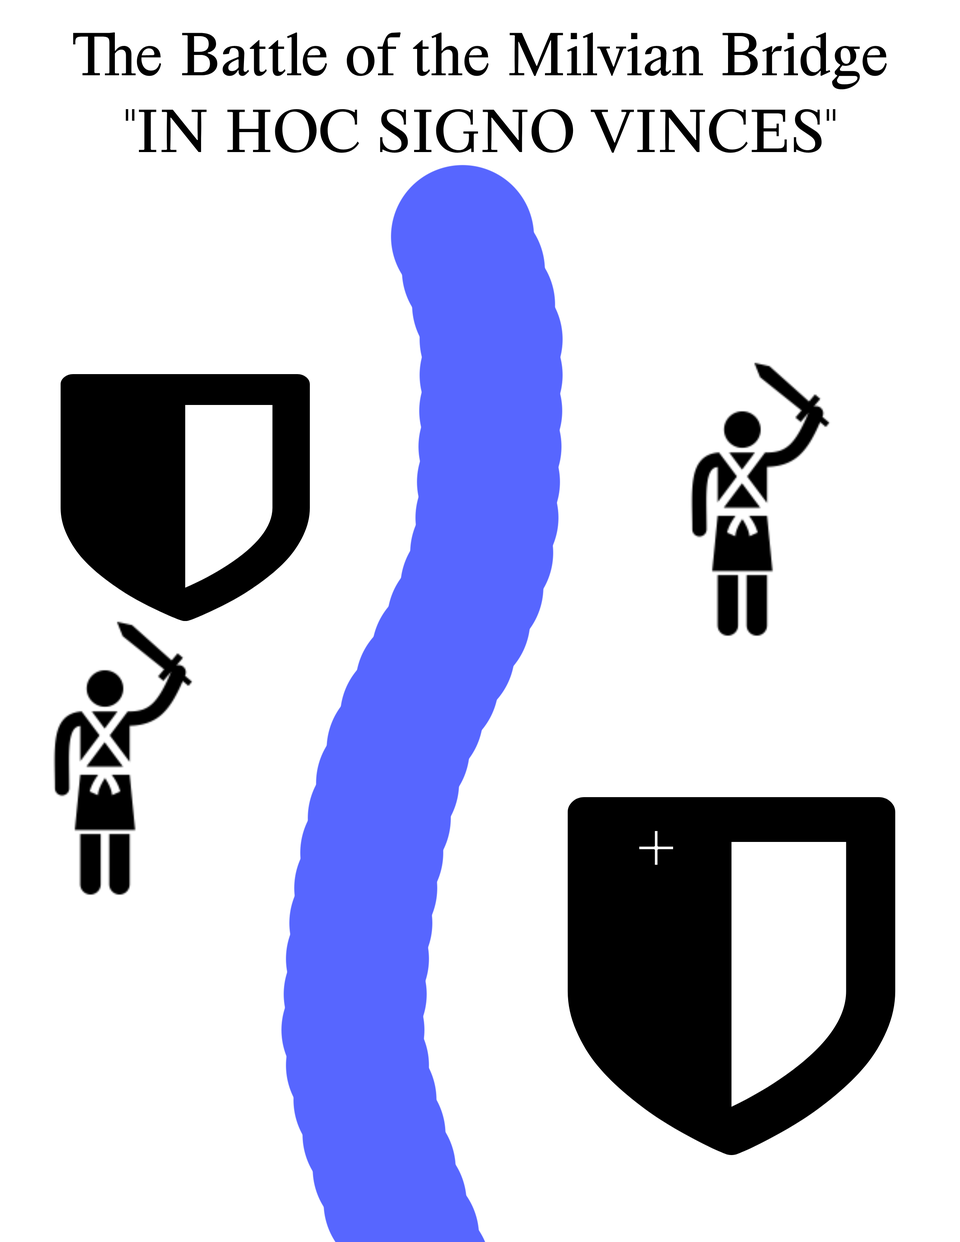
<style>
.page{position:relative;width:960px;height:1242px;background:#ffffff}
.page>*{position:absolute;margin:0}
.t1{font:64px "HappyTimesattheIKOB-Regular";color:#000000}
.t2{font:75.3px "HappyTimesattheIKOB-Regular";color:#ffffff}
</style>
<div class="page">
<p class="t1" style="left:73px;top:32px;width:814px;height:121px;text-align:center">The Battle of the Milvian Bridge<br>"IN HOC SIGNO VINCES"</p>
<p class="t2" style="left:639px;top:831px;width:34px;height:34px">+</p>
</div>
